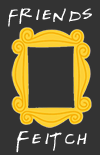
<style>
.page{position:relative;width:100px;height:155px;background:#333333}
.page>*{position:absolute;margin:0}
.t1{font:18.1px "Gregor-Miller's-Friends-Font-Regular";color:#ffffff}
</style>
<div class="page">
<p class="t1" style="left:8px;top:8px;width:84px;height:19px">friends</p>
<p class="t1" style="left:16px;top:131px;width:71px;height:22px">Feitch</p>
</div>
